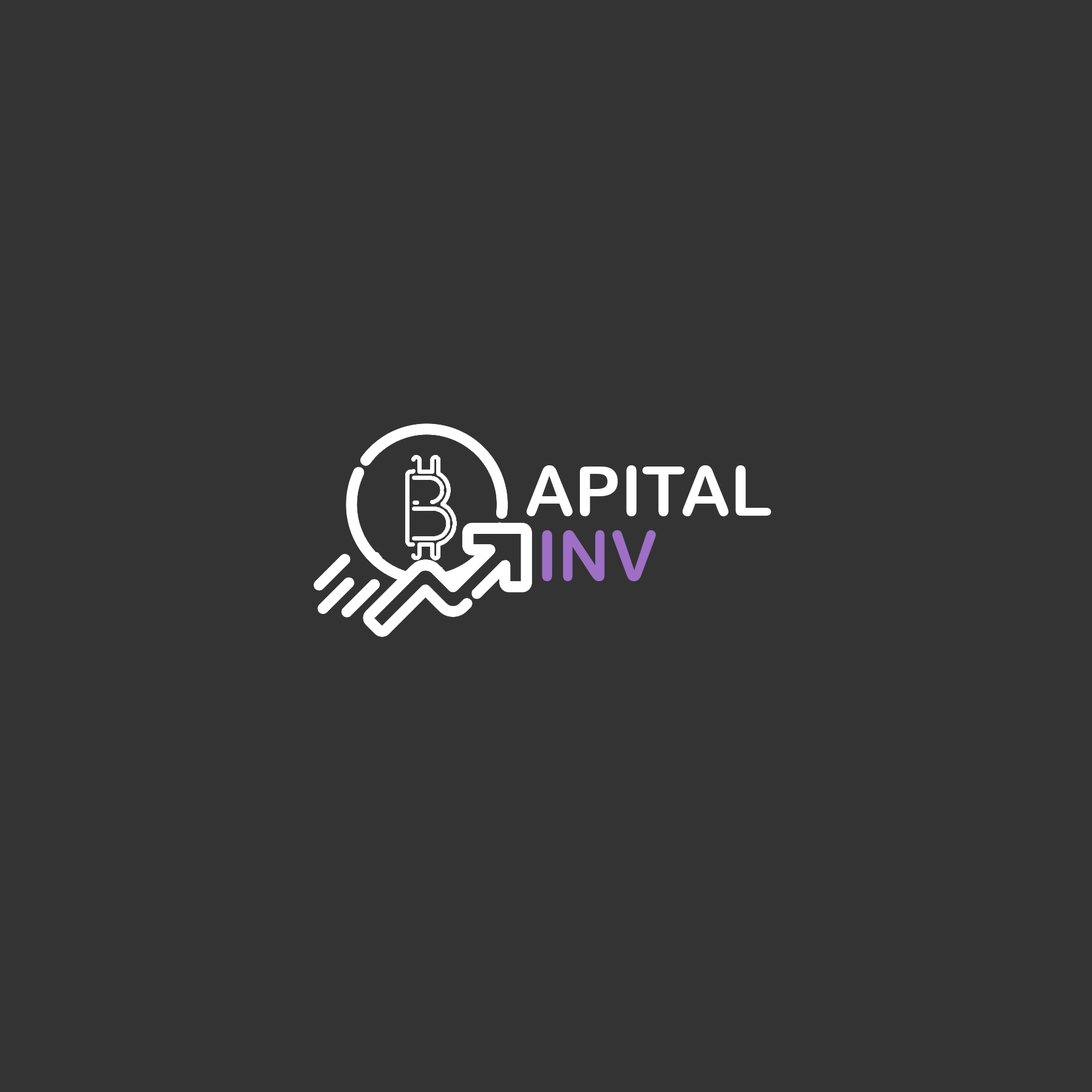
<style>
.page{position:relative;width:1092px;height:1092px;background:#333333}
.page>*{position:absolute;margin:0}
.t1{font:69px "ArialRoundedMTBold";color:#ffffff}
.t2{font:69px "ArialRoundedMTBold";color:#9e6fc5}
</style>
<div class="page">
<p class="t1" style="left:527px;top:465px;width:244px;height:51px">APITAL</p>
<p class="t2" style="left:542px;top:530px;width:114px;height:51px">INV</p>
</div>
